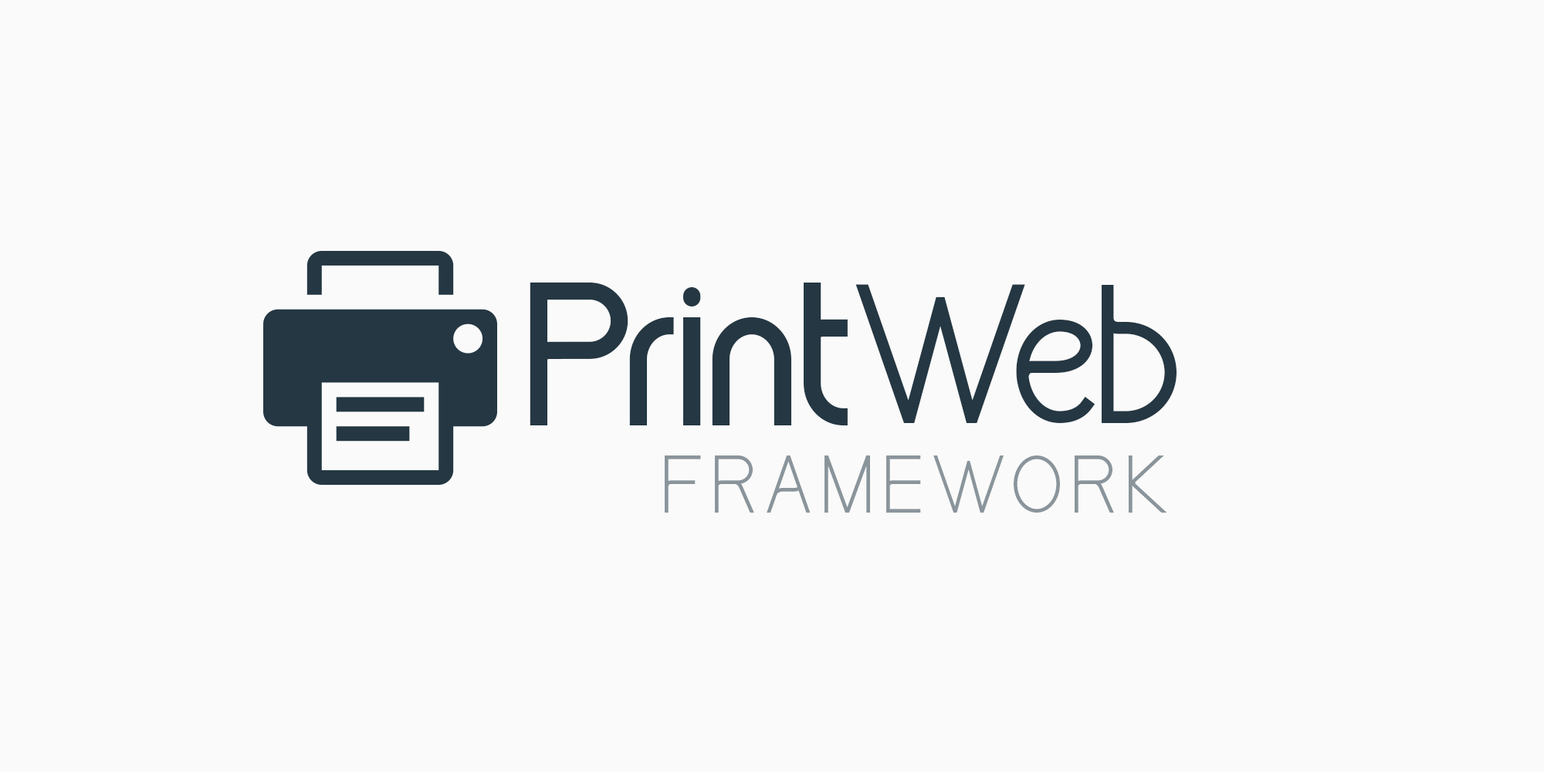
<style>
.page{position:relative;width:1544px;height:772px;background:#fafafa}
.page>*{position:absolute;margin:0}
.t1{font:171.1px "Kirvy-Bold";letter-spacing:-0.075em;color:#243743}
.t2{font:171.1px "Kirvy-Regular";letter-spacing:-0.075em;color:#243743}
.t3{font:73.1px "Kirvy-Light";letter-spacing:0.075em;color:#8a949b;text-transform:uppercase}
</style>
<div class="page">
<p class="t1" style="left:530px;top:282px;width:318px;height:144px">Print</p>
<p class="t1" style="left:530px;top:282px;width:318px;height:144px">Print</p>
<p class="t1" style="left:530px;top:282px;width:318px;height:144px">Print</p>
<p class="t1" style="left:530px;top:282px;width:318px;height:144px">Print</p>
<p class="t1" style="left:530px;top:282px;width:318px;height:144px">Print</p>
<p class="t2" style="left:856px;top:284px;width:321px;height:139px">Web</p>
<p class="t2" style="left:856px;top:284px;width:321px;height:139px">Web</p>
<p class="t2" style="left:856px;top:284px;width:321px;height:139px">Web</p>
<p class="t2" style="left:856px;top:284px;width:321px;height:139px">Web</p>
<p class="t2" style="left:856px;top:284px;width:321px;height:139px">Web</p>
<p class="t3" style="left:665px;top:456px;width:502px;height:57px">Framework</p>
<p class="t3" style="left:665px;top:456px;width:502px;height:57px">Framework</p>
<p class="t3" style="left:665px;top:456px;width:502px;height:57px">Framework</p>
<p class="t3" style="left:665px;top:456px;width:502px;height:57px">Framework</p>
<p class="t3" style="left:665px;top:456px;width:502px;height:57px">Framework</p>
</div>
